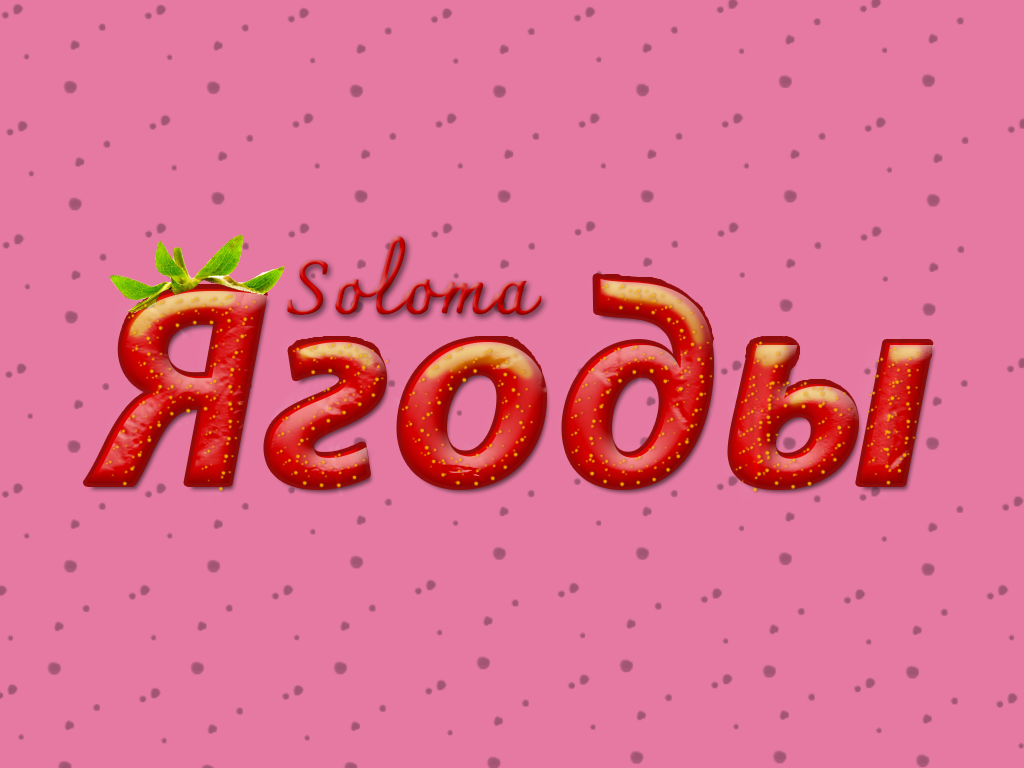
<style>
.page{position:relative;width:1024px;height:768px;background:#e579a2}
.page>*{position:absolute;margin:0}
.t1{font:75px "Charmonman-Regular";letter-spacing:0.02em;font-weight:bold}
.t2{font:286.1px "MyriadPro-BoldIt";letter-spacing:0.02em}
</style>
<div class="page">
<p class="t1" style="left:287px;top:236px;width:255px;height:79px">Soloma</p>
<p class="t2" style="left:90px;top:279px;width:844px;height:210px">Ягоды</p>
<p class="t2" style="left:90px;top:279px;width:844px;height:210px">Ягоды</p>
</div>
